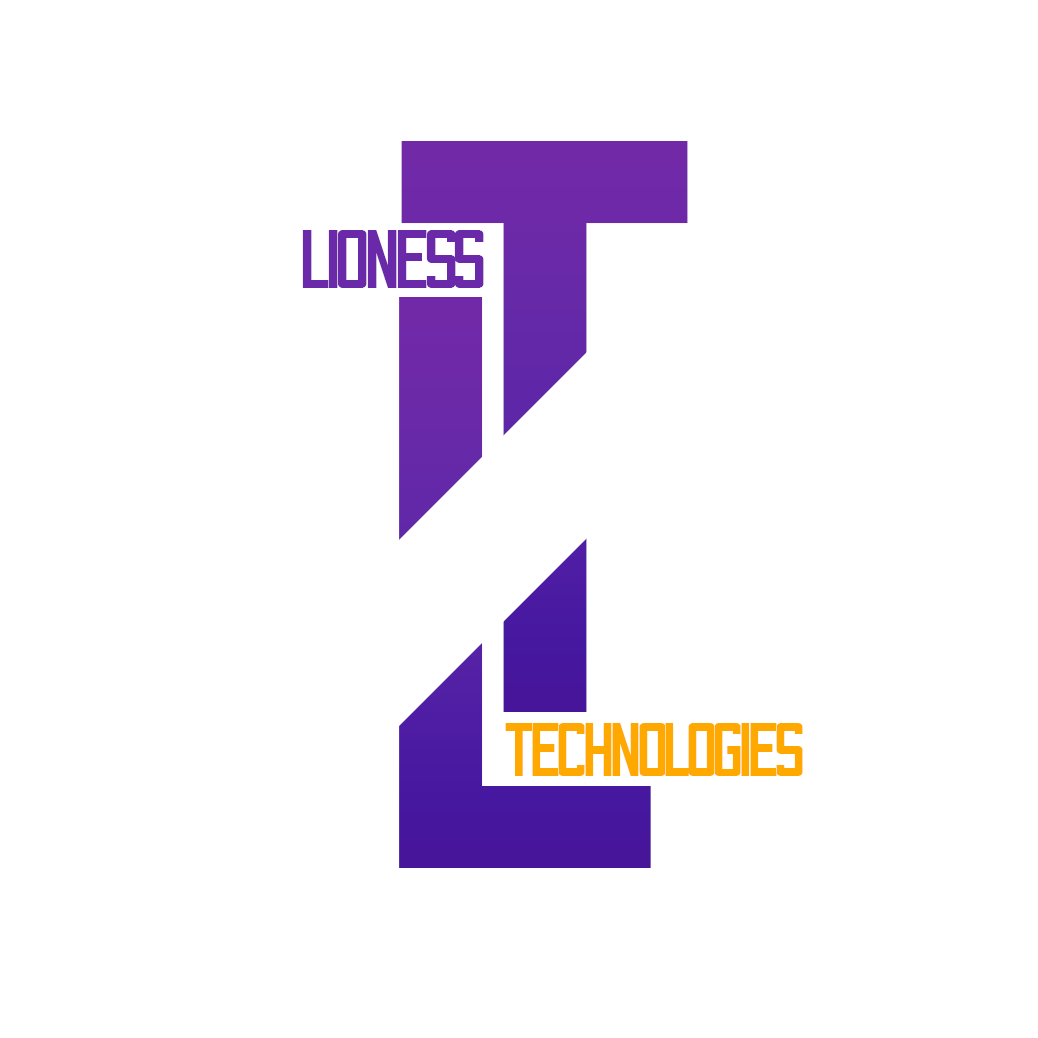
<style>
.page{position:relative;width:1038px;height:1038px;background:#ffffff}
.page>*{position:absolute;margin:0}
.t1{font:814.6px "Bootshaus-Regular";letter-spacing:-0.06em;scale:1.17 1}
.t2{font:82.9px "Bootshaus-Regular";letter-spacing:-0.06em;color:#6929a8;scale:1.17 1}
.t3{font:75px "Bootshaus-Regular";letter-spacing:-0.06em;color:#ffa800;scale:1.17 1}
</style>
<div class="page">
<p class="t1" style="left:401px;top:141px;width:287px;height:571px">T</p>
<p class="t2" style="left:302px;top:230px;width:182px;height:58px">Lioness</p>
<p class="t1" style="left:399px;top:297px;width:252px;height:571px">L</p>
<p class="t3" style="left:505px;top:723px;width:298px;height:53px">Technologies</p>
</div>
